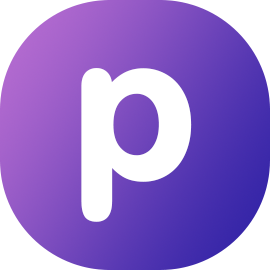
<style>
.page{position:relative;width:270px;height:270px;background:#ffffff}
.page>*{position:absolute;margin:0}
.t1{font:200px "ArialRoundedMTBold";color:#ffffff;font-weight:bold}
</style>
<div class="page">
<p class="t1" style="left:81px;top:68px;width:111px;height:154px">p</p>
</div>
